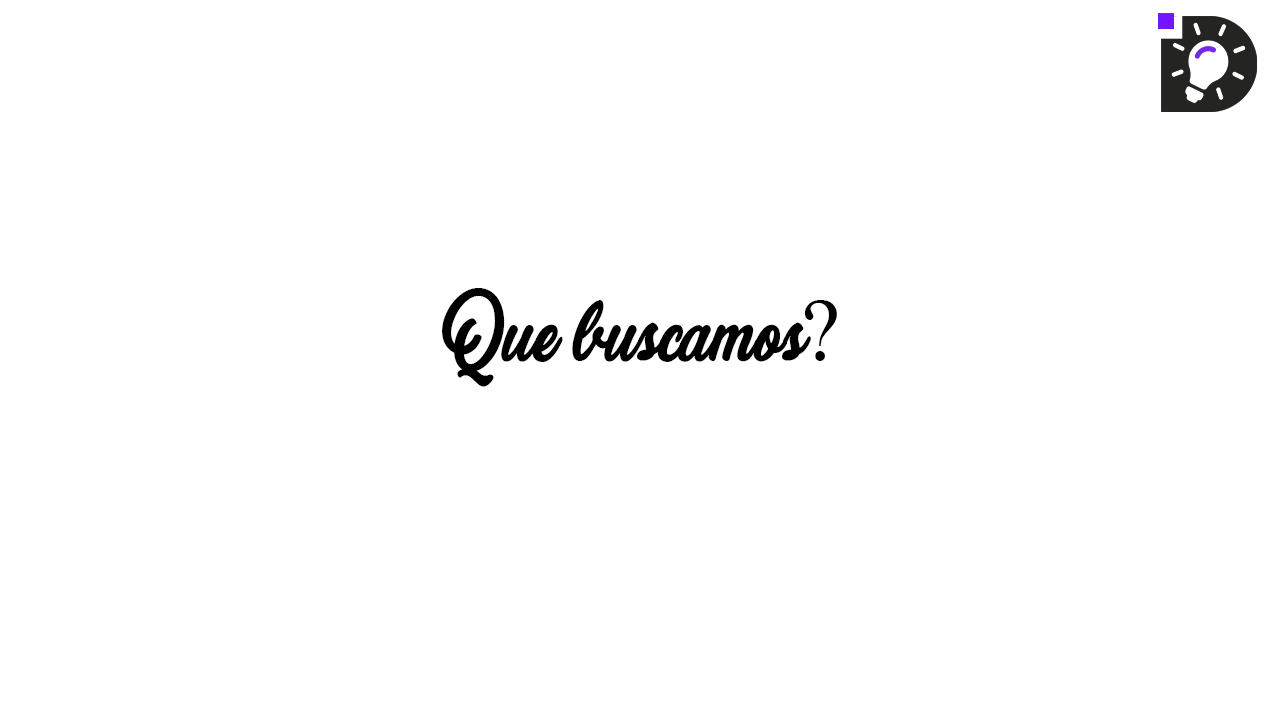
<style>
.page{position:relative;width:1280px;height:720px;background:#ffffff}
.page>*{position:absolute;margin:0}
.t1{font:88.9px "GottobeRealPersonalUse-Regular";color:#000000}
.t2{font:88.9px "TimesNewRomanPSMT";color:#000000}
</style>
<div class="page">
<p class="t1" style="left:442px;top:288px;width:395px;height:99px">Que buscamos<span class="t2">?</span></p>
</div>
